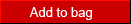
<style>
.page{position:relative;width:131px;height:24px;background:#cc0000}
.page>*{position:absolute;margin:0}
.t1{font:13px "ArialMT";color:#ffffff}
</style>
<div class="page">
<p class="t1" style="left:29px;top:7px;width:63px;height:13px">Add to bag</p>
</div>
